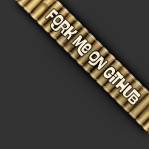
<style>
.page{position:relative;width:149px;height:149px;background:#333333}
.page>*{position:absolute;margin:0}
.t1{font:18px "SwungNote";color:#fff6e1}
</style>
<div class="page">
<p class="t1" style="left:45px;top:9px;width:96px;height:96px;rotate:45deg">Fork me on GitHub</p>
</div>
